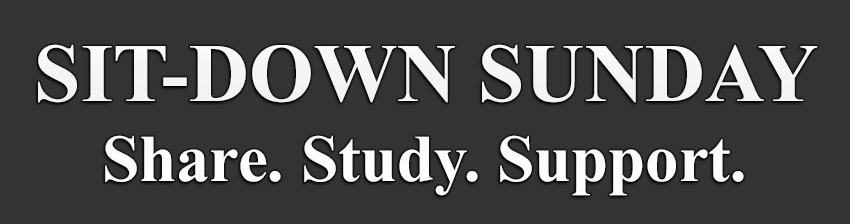
<style>
.page{position:relative;width:850px;height:224px;background:#333333}
.page>*{position:absolute;margin:0}
.t1{font:66.7px "TimesNewRomanPS-BoldMT";color:#ffffff}
.t2{font:83.3px "TimesNewRomanPS-BoldMT";color:#ffffff}
</style>
<div class="page">
<p class="t1" style="left:38px;top:44px;width:780px;height:152px;text-align:center"><span class="t2">SIT-DOWN SUNDAY<br></span>Share. Study. Support.</p>
</div>
